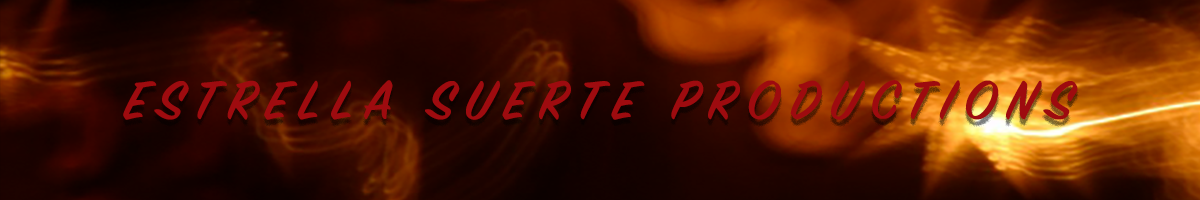
<style>
.page{position:relative;width:1200px;height:200px}
.page>*{position:absolute;margin:0}
.t1{font:60px "SignPainter-HouseScriptSemibold";letter-spacing:0.2em;color:#9e0b0f}
</style>
<div class="page">
<p class="t1" style="left:123px;top:80px;width:955px;height:40px">ESTRELLA SUERTE PRODUCTIONS</p>
</div>
